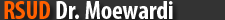
<style>
.page{position:relative;width:225px;height:20px;background:#333333}
.page>*{position:absolute;margin:0}
.t1{font:25.8px "MyriadPro-BoldCond";color:#ffffff}
.t2{font:25.8px "MyriadPro-BoldCond";color:#ff6000}
</style>
<div class="page">
<p class="t1" style="left:4px;top:1px;width:169px;height:18px"><span class="t2">RSUD</span> Dr. Moewardi</p>
</div>
